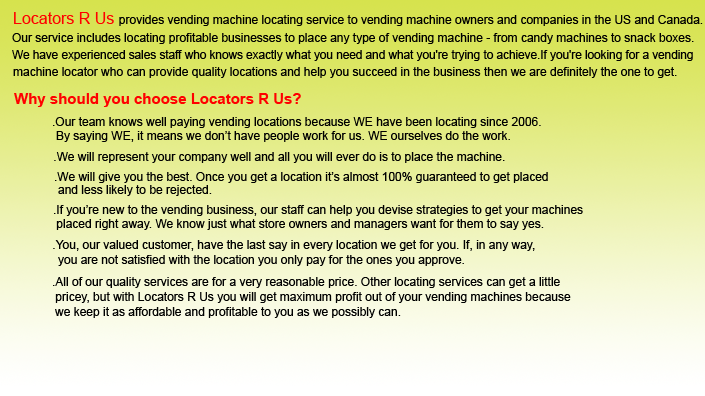
<style>
.page{position:relative;width:705px;height:396px}
.page>*{position:absolute;margin:0}
.t1{font:12px "ArialMT";color:#000000}
.t2{font:16px "ArialMT";color:#ff0000}
.t3{font:15px "Arial-BoldMT";color:#ff0000}
</style>
<div class="page">
<p class="t1" style="left:14px;top:12px;width:689px;height:14px"><span class="t2">Locators R Us </span>provides vending machine locating service to vending machine owners and companies in the US and Canada.</p>
<p class="t1" style="left:12px;top:33px;width:682px;height:11px">Our service includes locating profitable businesses to place any type of vending machine - from candy machines to snack boxes.</p>
<p class="t1" style="left:12px;top:50px;width:681px;height:11px">We have experienced sales staff who knows exactly what you need and what you're trying to achieve.If you're looking for a vending</p>
<p class="t1" style="left:13px;top:67px;width:664px;height:11px">machine locator who can provide quality locations and help you succeed in the business then we are definitely the one to get.</p>
<p class="t3" style="left:14px;top:93px;width:287px;height:14px">Why should you choose Locators R Us?</p>
<p class="t1" style="left:53px;top:117px;width:488px;height:11px">.Our team knows well paying vending locations because WE have been locating since 2006.</p>
<p class="t1" style="left:56px;top:131px;width:454px;height:11px">By saying WE, it means we don’t have people work for us. WE ourselves do the work.</p>
<p class="t1" style="left:54px;top:152px;width:451px;height:11px">.We will represent your company well and all you will ever do is to place the machine.</p>
<p class="t1" style="left:55px;top:172px;width:493px;height:11px">.We will give you the best. Once you get a location it’s almost 100% guaranteed to get placed</p>
<p class="t1" style="left:58px;top:185px;width:154px;height:11px">and less likely to be rejected.</p>
<p class="t1" style="left:54px;top:205px;width:529px;height:11px">.If you’re new to the vending business, our staff can help you devise strategies to get your machines</p>
<p class="t1" style="left:56px;top:219px;width:488px;height:11px">placed right away. We know just what store owners and managers want for them to say yes.</p>
<p class="t1" style="left:53px;top:240px;width:482px;height:11px">.You, our valued customer, have the last say in every location we get for you. If, in any way,</p>
<p class="t1" style="left:58px;top:255px;width:406px;height:11px">you are not satisfied with the location you only pay for the ones you approve.</p>
<p class="t1" style="left:53px;top:277px;width:507px;height:11px">.All of our quality services are for a very reasonable price. Other locating services can get a little</p>
<p class="t1" style="left:55px;top:292px;width:516px;height:11px">pricey, but with Locators R Us you will get maximum profit out of your vending machines because</p>
<p class="t1" style="left:55px;top:307px;width:346px;height:11px">we keep it as affordable and profitable to you as we possibly can.</p>
</div>
